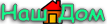
<style>
.page{position:relative;width:107px;height:24px}
.page>*{position:absolute;margin:0}
.t1{font:20.6px "ComicSansMS-Bold";color:#10fa89;scale:1.1 1}
</style>
<div class="page">
<p class="t1" style="left:1px;top:4px;width:104px;height:19px">Наш Дом</p>
</div>
